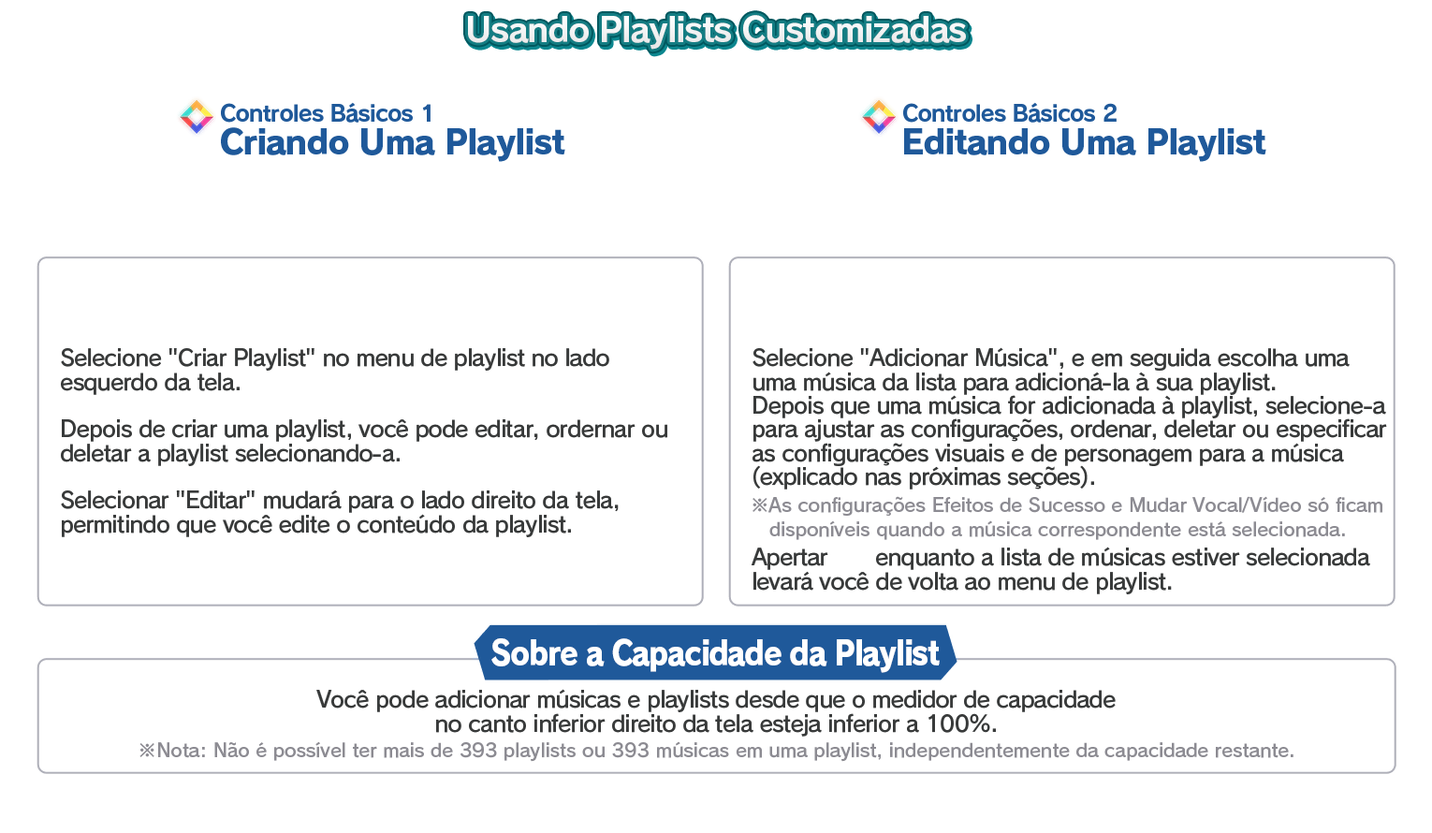
<style>
.page{position:relative;width:1432px;height:833px;background:#ffffff}
.page>*{position:absolute;margin:0}
.t1{font:33.7px "RodinPro-B";letter-spacing:-0.039em;color:#f2f2f3}
.t2{font:22.5px "RodinPro-B";letter-spacing:-0.039em;color:#1f599a}
.t3{font:33.7px "RodinPro-EB";letter-spacing:-0.04em;color:#1f599a}
.t4{font:22.5px/23.7px "RodinPro-DB";letter-spacing:-0.04em;color:#383a3a}
.t5{font:18.7px/23.7px "RodinPro-DB";letter-spacing:-0.014em;color:#8c8b92}
.t6{font:33.7px "RodinPro-EB";letter-spacing:-0.048em;color:#ffffff;scale:0.89 1}
.t7{font:18.7px "RodinPro-DB";letter-spacing:-0.014em;color:#8c8b92}
</style>
<div class="page">
<p class="t1" style="left:468px;top:15px;width:498px;height:35px">Usando Playlists Customizadas</p>
<p class="t2" style="left:221px;top:102px;width:209px;height:21px">Controles Básicos 1</p>
<p class="t2" style="left:903px;top:102px;width:213px;height:21px">Controles Básicos 2</p>
<p class="t3" style="left:221px;top:127px;width:344px;height:35px">Criando Uma Playlist</p>
<p class="t3" style="left:904px;top:128px;width:362px;height:34px">Editando Uma Playlist</p>
<p class="t4" style="left:61px;top:348px;width:606px;height:189px">Selecione "Criar Playlist" no menu de playlist no lado<br>esquerdo da tela.<br><br>Depois de criar uma playlist, você pode editar, ordernar ou<br>deletar a playlist selecionando-a.<br><br>Selecionar "Editar" mudará para o lado direito da tela,<br>permitindo que você edite o conteúdo da playlist.</p>
<p class="t4" style="left:752px;top:347px;width:635px;height:142px">Selecione "Adicionar Música", e em seguida escolha uma<br>uma música da lista para adicioná-la à sua playlist.<br>Depois que uma música for adicionada à playlist, selecione-a<br>para ajustar as configurações, ordenar, deletar ou especificar<br>as configurações visuais e de personagem para a música<br>(explicado nas próximas seções).</p>
<p class="t5" style="left:752px;top:496px;width:630px;height:44px">※As configurações Efeitos de Sucesso e Mudar Vocal/Vídeo só ficam<br>   disponíveis quando a música correspondente está selecionada.</p>
<p class="t4" style="left:751px;top:546px;width:619px;height:48px">Apertar       enquanto a lista de músicas estiver selecionada<br>levará você de volta ao menu de playlist.</p>
<p class="t6" style="left:491px;top:638px;width:449px;height:35px">Sobre a Capacidade da Playlist</p>
<p class="t4" style="left:316px;top:689px;width:799px;height:47px;text-align:center">Você pode adicionar músicas e playlists desde que o medidor de capacidade<br>no canto inferior direito da tela esteja inferior a 100%.</p>
<p class="t7" style="left:139px;top:741px;width:1154px;height:21px">※Nota: Não é possível ter mais de 393 playlists ou 393 músicas em uma playlist, independentemente da capacidade restante.</p>
</div>
